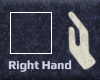
<style>
.page{position:relative;width:100px;height:80px}
.page>*{position:absolute;margin:0}
.t1{font:12px "Play-Bold";color:#ced3e7}
</style>
<div class="page">
<p class="t1" style="left:8px;top:60px;width:64px;height:12px">Right Hand</p>
</div>
